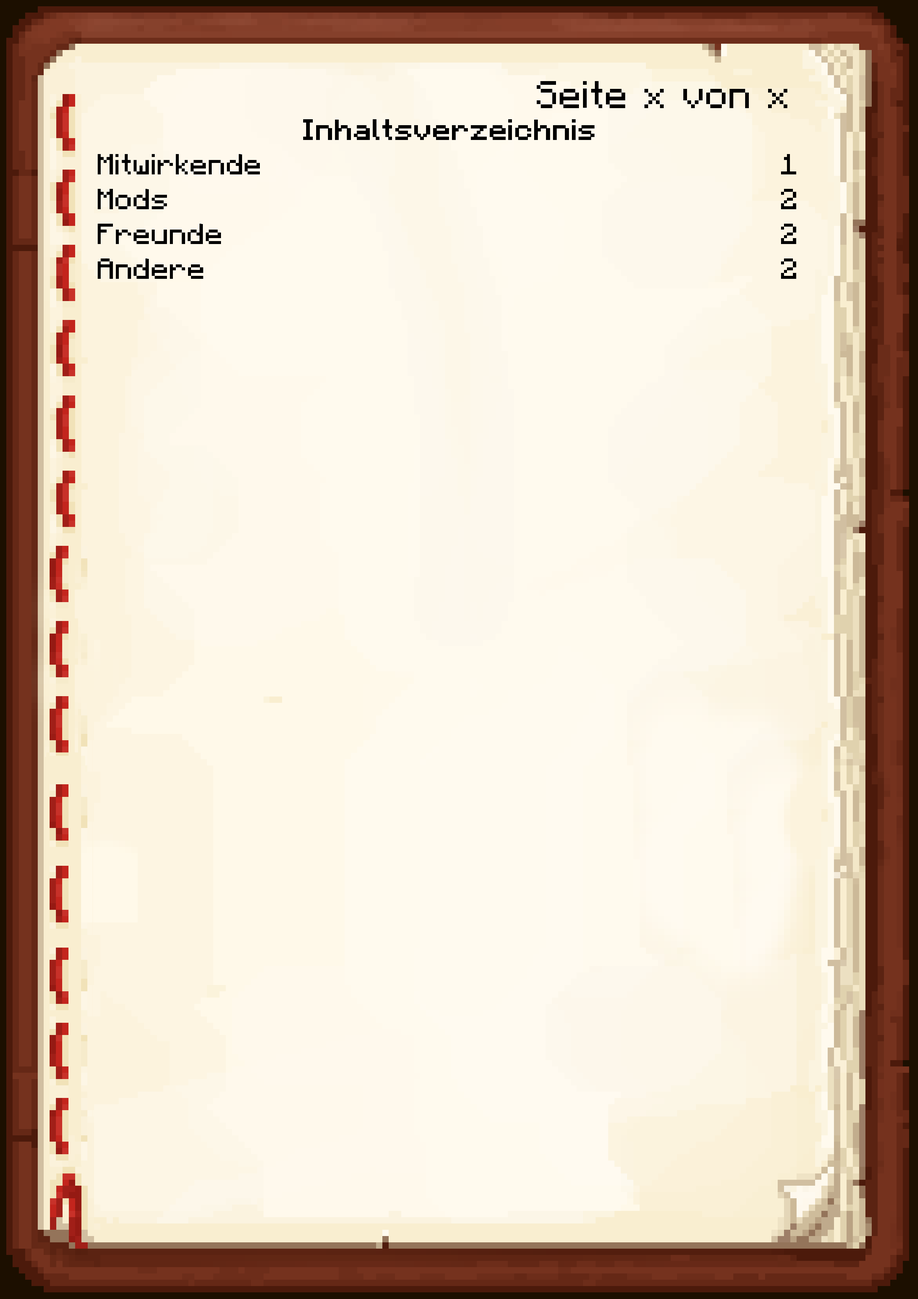
<style>
.page{position:relative;width:918px;height:1299px}
.page>*{position:absolute;margin:0}
.t1{font:38.6px "Minecraft-Regular";color:#000000}
.t2{font:29px "Minecraft-Regular";color:#000000;scale:1.04 1}
.t3{font:29px "Minecraft-Regular";color:#000000;font-weight:bold;scale:1.04 1}
</style>
<div class="page">
<p class="t1" style="left:537px;top:81px;width:250px;height:27px">Seite x von x</p>
<p class="t2" style="left:98px;top:119px;width:698px;height:160px;text-align:center"><span class="t3">Inhaltsverzeichnis<br></span>Mitwirkende                                      1<br>Mods                                             2<br>Freunde                                         2<br>Andere                                           2</p>
</div>
